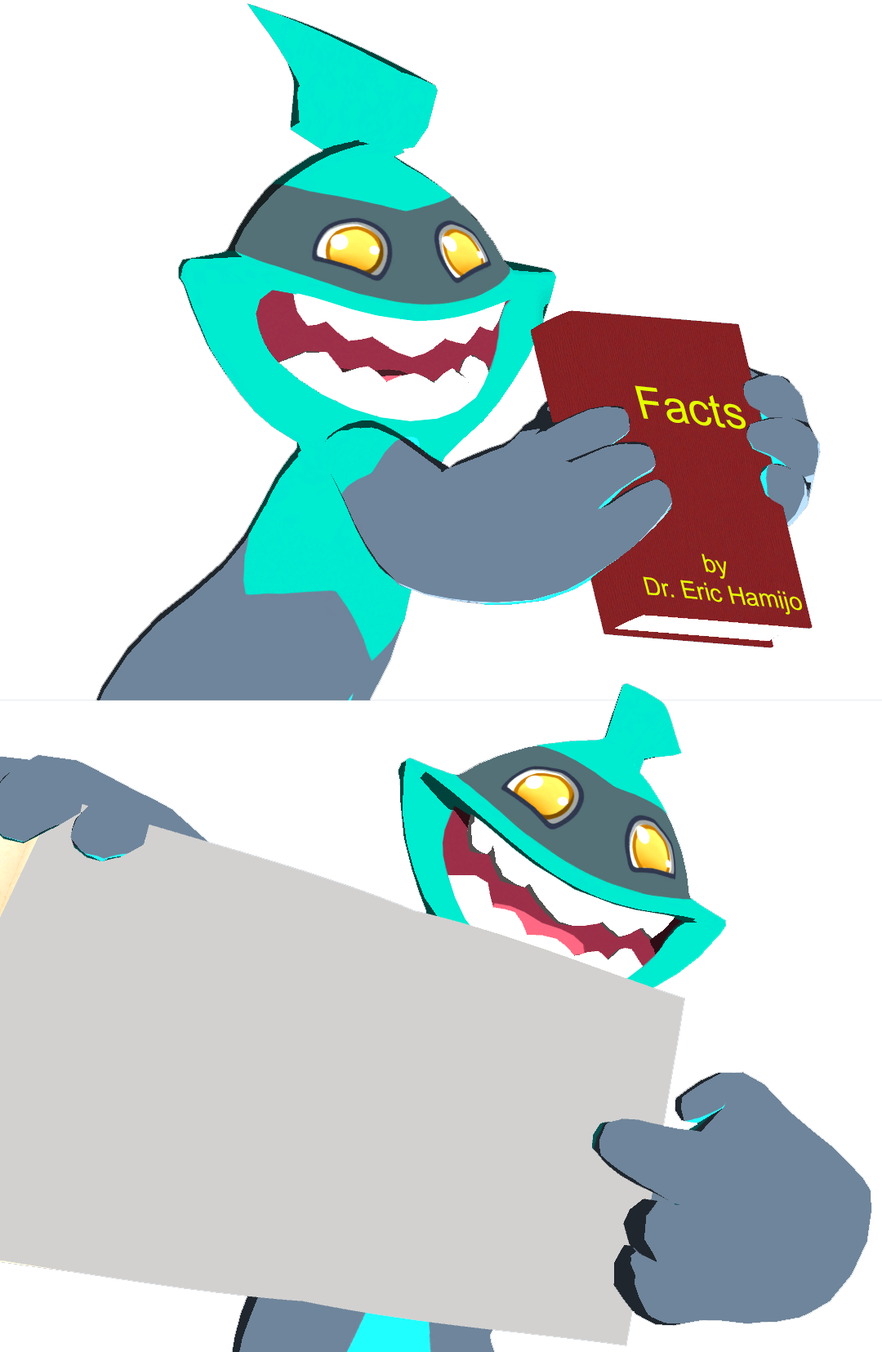
<style>
.page{position:relative;width:882px;height:1352px;background:#ffffff}
.page>*{position:absolute;margin:0}
.t1{font:47.3px "ArialMT";color:#e4ff00;scale:0.94 1}
.t2{font:25.6px "ArialMT";color:#e4ff00;scale:0.93 1}
</style>
<div class="page">
<p class="t1" style="left:634px;top:385px;width:111px;height:44px;rotate:6deg">Facts</p>
<p class="t2" style="left:643px;top:554px;width:159px;height:61px;text-align:center;rotate:6deg">by<br>Dr. Eric Hamijo</p>
</div>
